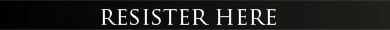
<style>
.page{position:relative;width:390px;height:30px}
.page>*{position:absolute;margin:0}
.t1{font:24px "TrajanPro-Regular";color:#ffffff}
</style>
<div class="page">
<p class="t1" style="left:101px;top:9px;width:176px;height:16px">resister here</p>
</div>
